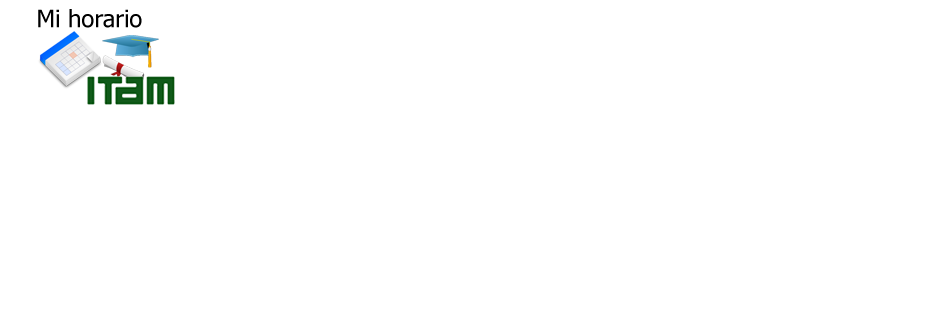
<style>
.page{position:relative;width:945px;height:335px;background:#ffffff}
.page>*{position:absolute;margin:0}
.t1{font:24px "Tahoma";color:#000000}
</style>
<div class="page">
<p class="t1" style="left:38px;top:9px;width:104px;height:19px">Mi horario</p>
</div>
